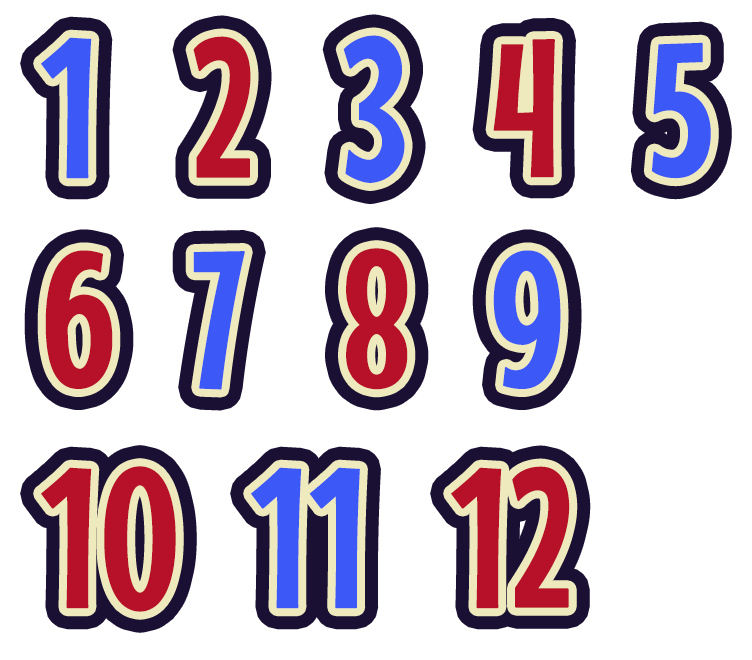
<style>
.page{position:relative;width:752px;height:660px;background:#ffffff}
.page>*{position:absolute;margin:0}
.t1{font:194.4px "MouseMemoirs-Regular";color:#3c58f6;font-weight:bold}
.t2{font:194.4px "MouseMemoirs-Regular";color:#b71129;font-weight:bold}
</style>
<div class="page">
<p class="t1" style="left:41px;top:37px;width:51px;height:142px">1</p>
<p class="t2" style="left:193px;top:36px;width:58px;height:142px">2</p>
<p class="t1" style="left:343px;top:35px;width:62px;height:148px">3</p>
<p class="t2" style="left:493px;top:39px;width:62px;height:139px">4</p>
<p class="t1" style="left:651px;top:42px;width:60px;height:137px">5</p>
<p class="t2" style="left:45px;top:250px;width:68px;height:139px">6</p>
<p class="t1" style="left:193px;top:251px;width:52px;height:139px">7</p>
<p class="t2" style="left:346px;top:248px;width:62px;height:142px">8</p>
<p class="t1" style="left:493px;top:250px;width:68px;height:139px">9</p>
<p class="t2" style="left:41px;top:466px;width:135px;height:146px">10</p>
<p class="t1" style="left:251px;top:467px;width:109px;height:142px">11</p>
<p class="t2" style="left:451px;top:466px;width:119px;height:143px">12</p>
</div>
